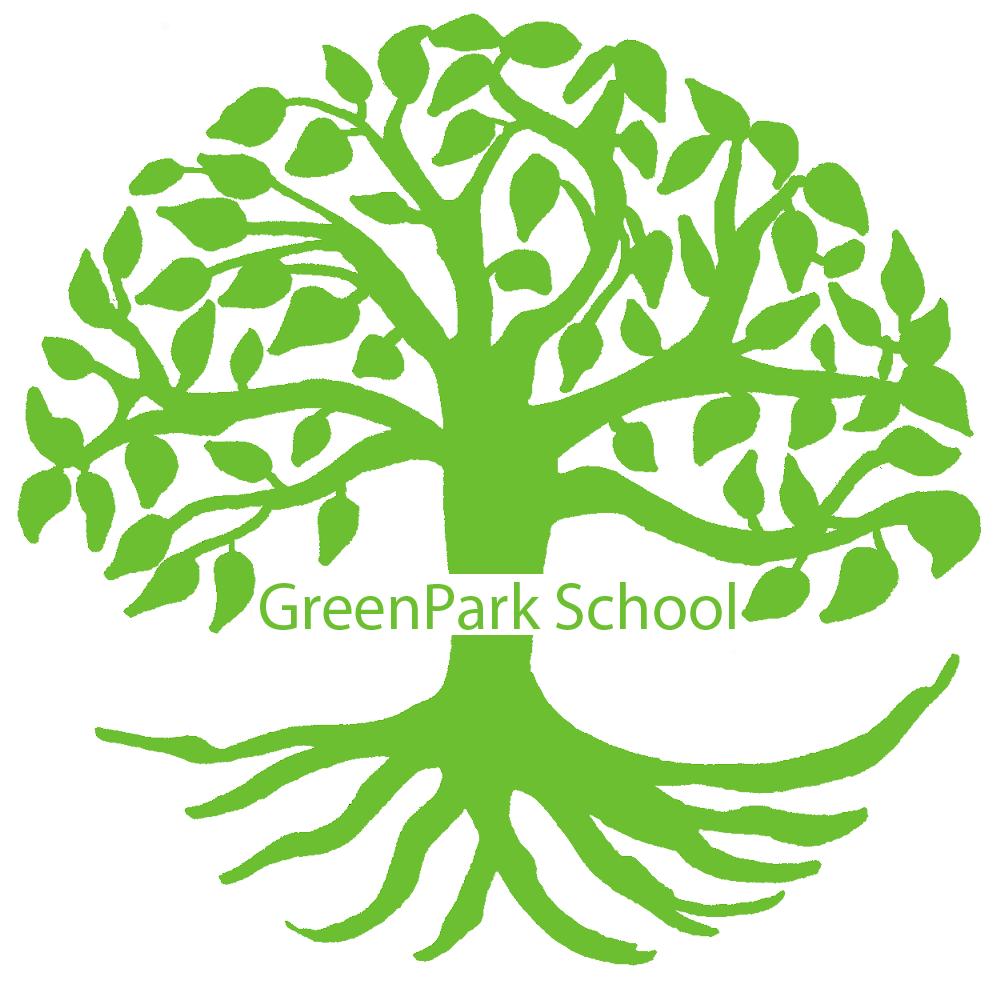
<style>
.page{position:relative;width:996px;height:984px;background:#ffffff}
.page>*{position:absolute;margin:0}
.t1{font:66.3px "MyriadPro-Regular";color:#6bbf30}
</style>
<div class="page">
<p class="t1" style="left:260px;top:582px;width:475px;height:48px">GreenPark School</p>
</div>
